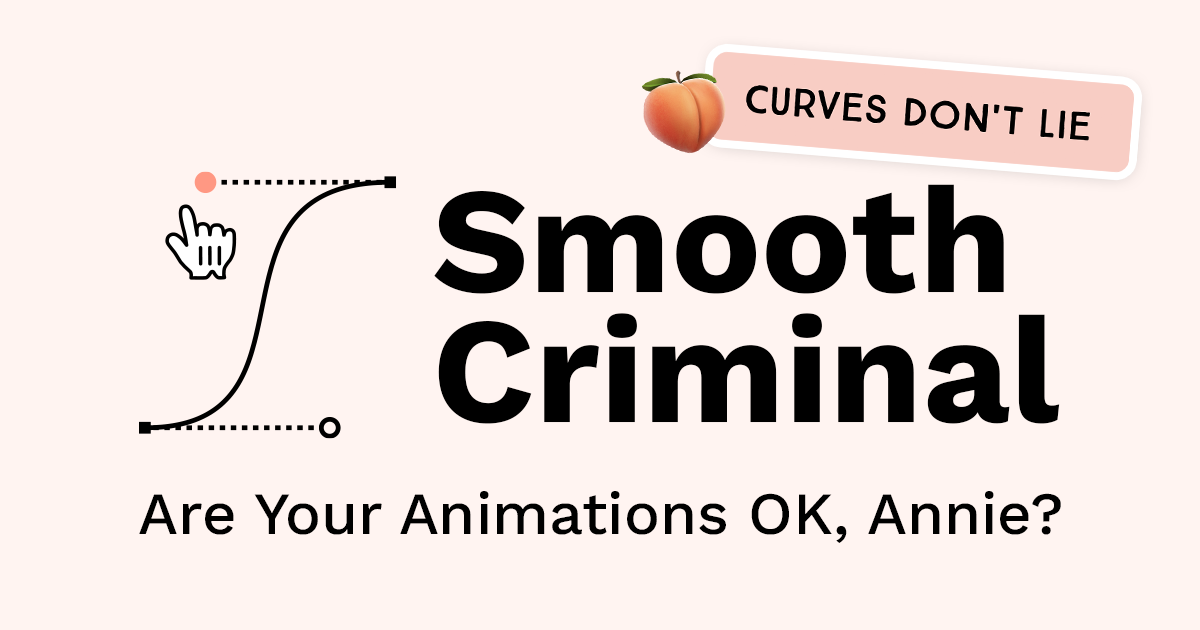
<style>
.page{position:relative;width:1200px;height:630px;background:#fff4f1}
.page>*{position:absolute;margin:0}
.t1{font:150.7px/130px "WorkSans-Bold";color:#000000}
.t2{font:60px "WorkSans-Medium";color:#000000}
</style>
<div class="page">
<p class="t1" style="left:434px;top:184px;width:626px;height:240px">Smooth<br>Criminal</p>
<p class="t2" style="left:139px;top:491px;width:922px;height:52px">Are Your Animations OK, Annie?</p>
</div>
